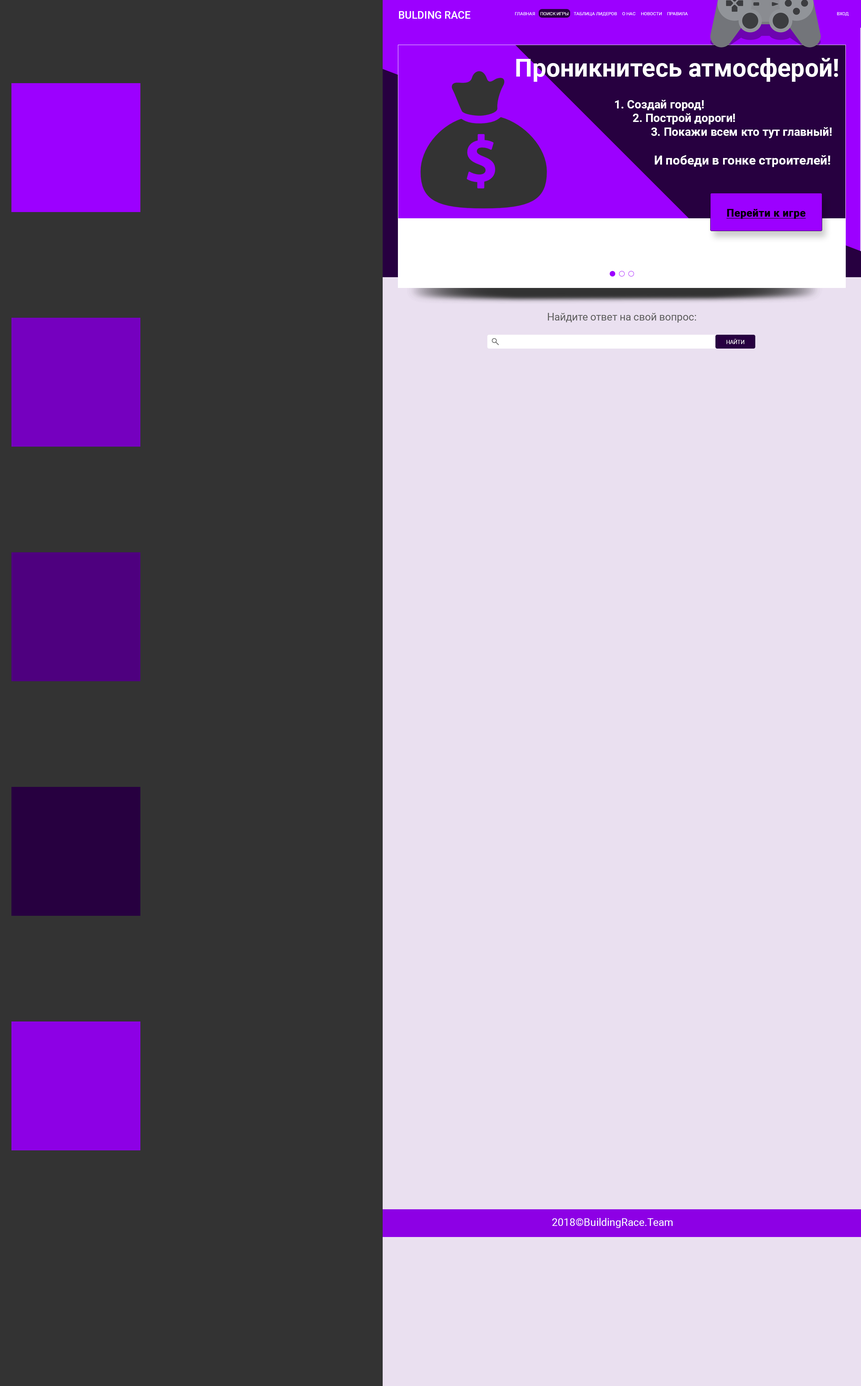
<style>
.page{position:relative;width:861px;height:1386px;background:#eae0f0}
.page>*{position:absolute;margin:0}
.t1{font:10.4px "Roboto-Medium";color:#ffffff}
.t2{font:4.5px "Roboto-Regular";color:#ffffff}
.t3{font:24.9px "Roboto-Bold";color:#ffffff}
.t4{font:11.4px "Roboto-Bold";color:#ffffff}
.t5{font:12.5px "Roboto-Bold";color:#ffffff}
.t6{font:10.4px "Roboto-Bold";color:#000000;font-weight:bold;text-decoration:underline}
.t7{font:10.4px "Roboto-Regular";color:#5f5f5f}
.t8{font:5.5px "Roboto-Regular";color:#ffffff}
.t9{font:10.4px "Roboto-Regular";color:#ffffff}
</style>
<div class="page">
<p class="t1" style="left:399px;top:11px;width:71px;height:8px">BULDING RACE</p>
<p class="t2" style="left:515px;top:12px;width:333px;height:4px">ГЛАВНАЯ     ПОИСК ИГРЫ     ТАБЛИЦА ЛИДЕРОВ     О НАС     НОВОСТИ     ПРАВИЛА                                                                                                                                               ВХОД</p>
<p class="t3" style="left:516px;top:58px;width:322px;height:24px">Проникнитесь атмосферой!</p>
<p class="t3" style="left:516px;top:58px;width:322px;height:24px">Проникнитесь атмосферой!</p>
<p class="t4" style="left:615px;top:100px;width:216px;height:67px">1. Создай город!<br>      2. Построй дороги!<br>            3. Покажи всем кто тут главный!<br><br>             <span class="t5">И победи в гонке строителей!</span></p>
<p class="t4" style="left:615px;top:100px;width:216px;height:67px">1. Создай город!<br>      2. Построй дороги!<br>            3. Покажи всем кто тут главный!<br><br>             <span class="t5">И победи в гонке строителей!</span></p>
<p class="t6" style="left:726px;top:209px;width:79px;height:10px">Перейти к игре</p>
<p class="t6" style="left:726px;top:209px;width:79px;height:10px">Перейти к игре</p>
<p class="t7" style="left:547px;top:313px;width:149px;height:10px">Найдите ответ на свой вопрос:</p>
<p class="t8" style="left:726px;top:339px;width:18px;height:5px">НАЙТИ</p>
<p class="t9" style="left:552px;top:1218px;width:120px;height:10px">2018©BuildingRace.Team</p>
</div>
